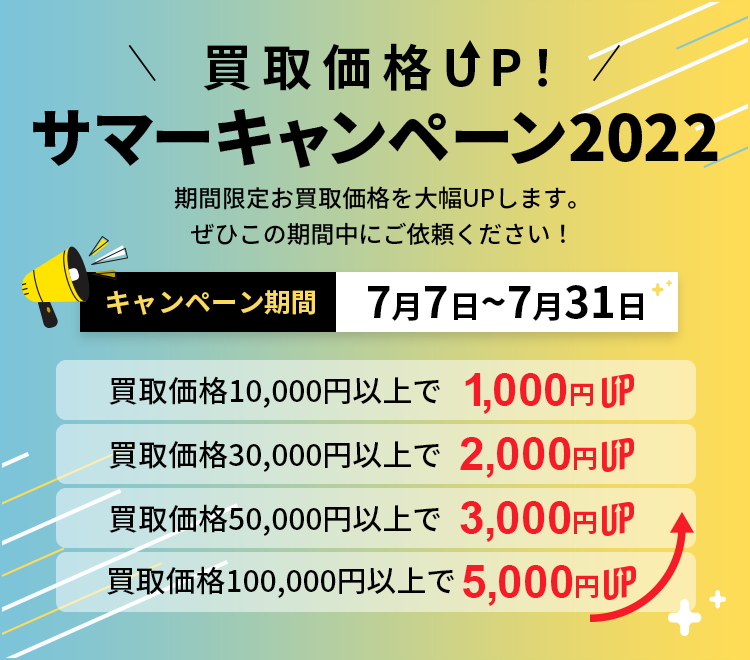
<style>
.page{position:relative;width:750px;height:660px}
.page>*{position:absolute;margin:0}
.t1{font:50px "NotoSansCJKjp-Bold";letter-spacing:0.2em;color:#000000}
.t2{font:63.1px "NotoSansCJKjp-Black";color:#000000}
.t3{font:24px/36px "NotoSansCJKjp-Medium";color:#000000}
.t4{font:26.6px "NotoSansCJKjp-Bold";color:#f8db4e}
.t5{font:44.1px "NotoSansCJKjp-Bold";color:#000000}
.t6{font:31.5px "NotoSansCJKjp-Bold";color:#000000}
.t7{font:30px "NotoSansCJKjp-Medium";color:#000000}
.t8{font:46px "Arial-BoldMT";color:#f51c28}
.t9{font:26px "NotoSansCJKjp-Bold";color:#f51c28}
</style>
<div class="page">
<p class="t1" style="left:203px;top:43px;width:344px;height:48px">買取価格UP！</p>
<p class="t2" style="left:33px;top:109px;width:685px;height:59px">サマーキャンペーン2022</p>
<p class="t3" style="left:174px;top:186px;width:402px;height:60px;text-align:center">期間限定お買取価格を大幅UPします。<br>ぜひこの期間中にご依頼ください！</p>
<p class="t4" style="left:107px;top:290px;width:208px;height:25px">キャンペーン期間</p>
<p class="t5" style="left:368px;top:285px;width:275px;height:36px">7<span class="t6">月</span>7<span class="t6">日</span>~7<span class="t6">月</span>31<span class="t6">日</span></p>
<p class="t7" style="left:109px;top:376px;width:331px;height:32px">買取価格10,000円以上で</p>
<p class="t8" style="left:465px;top:373px;width:128px;height:41px">1,000<span class="t9">円</span></p>
<p class="t8" style="left:460px;top:437px;width:136px;height:41px">2,000<span class="t9">円</span></p>
<p class="t7" style="left:109px;top:440px;width:331px;height:32px">買取価格30,000円以上で</p>
<p class="t7" style="left:109px;top:504px;width:331px;height:32px">買取価格50,000円以上で</p>
<p class="t8" style="left:460px;top:501px;width:136px;height:41px">3,000<span class="t9">円</span></p>
<p class="t7" style="left:107px;top:566px;width:347px;height:32px">買取価格100,000円以上で</p>
<p class="t8" style="left:463px;top:565px;width:135px;height:41px">5,000<span class="t9">円</span></p>
</div>
